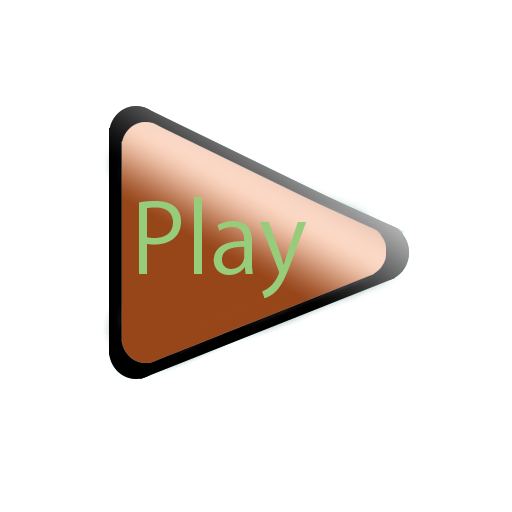
<style>
.page{position:relative;width:512px;height:512px;background:#ffffff}
.page>*{position:absolute;margin:0}
.t1{font:96px "KozGoPr6N-Regular";color:#97cc7a}
</style>
<div class="page">
<p class="t1" style="left:139px;top:197px;width:168px;height:102px">Play</p>
</div>
